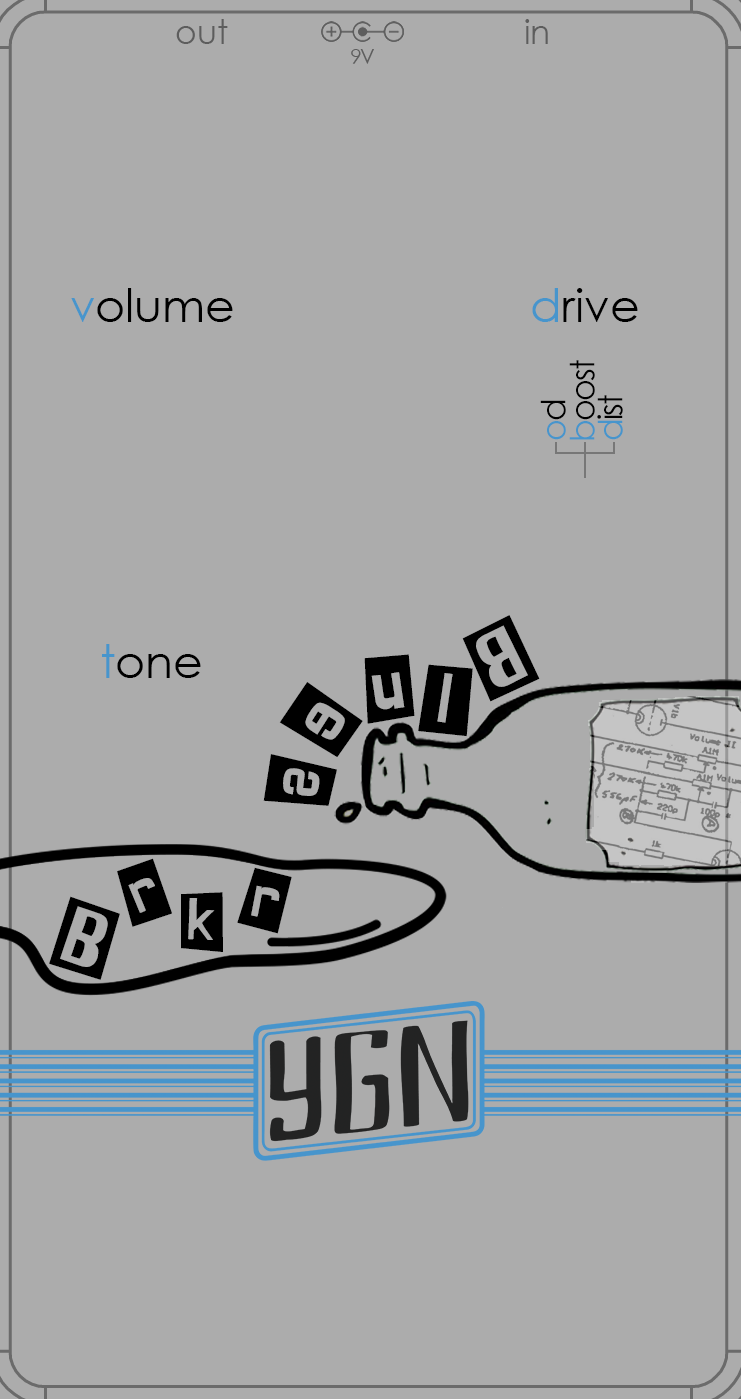
<style>
.page{position:relative;width:741px;height:1399px;background:#acacac}
.page>*{position:absolute;margin:0}
.t1{font:33.3px "CenturyGothic";color:#5d5d5d}
.t2{font:21.5px "CenturyGothic";letter-spacing:-0.1em;color:#5d5d5d}
.t3{font:21.5px "CenturyGothic";color:#5d5d5d}
.t4{font:45.8px "CenturyGothic";color:#000000}
.t5{font:45.8px "CenturyGothic";color:#4795cc}
.t6{font:33.3px "CenturyGothic";letter-spacing:-0.06em;color:#000000}
.t7{font:33.3px "CenturyGothic";letter-spacing:-0.06em;color:#4795cc}
.t8{font:82.7px "SHINJI-BLUES";color:#000000}
.t9{font:70.9px "SHINJI-BLUES";color:#000000}
</style>
<div class="page">
<p class="t1" style="left:176px;top:19px;width:372px;height:25px">out                                in</p>
<p class="t2" style="left:351px;top:49px;width:23px;height:15px">9<span class="t3">V</span></p>
<p class="t4" style="left:71px;top:288px;width:162px;height:34px"><span class="t5">v</span>olume</p>
<p class="t4" style="left:532px;top:288px;width:106px;height:34px"><span class="t5">d</span>rive</p>
<p class="t6" style="left:569px;top:360px;width:26px;height:80px;rotate:-90deg"><span class="t7">b</span>oost</p>
<p class="t7" style="left:540px;top:400px;width:26px;height:40px;rotate:-90deg">o<span class="t6">d</span></p>
<p class="t6" style="left:597px;top:395px;width:26px;height:45px;rotate:-90deg"><span class="t7">d</span>ist</p>
<p class="t8" style="left:462px;top:615px;width:78px;height:87px;rotate:154deg">B</p>
<p class="t4" style="left:102px;top:644px;width:99px;height:34px"><span class="t5">t</span>one</p>
<p class="t8" style="left:364px;top:654px;width:51px;height:70px;rotate:-9deg">u</p>
<p class="t8" style="left:418px;top:664px;width:55px;height:73px;rotate:8deg">l</p>
<p class="t8" style="left:279px;top:682px;width:84px;height:75px;rotate:123deg">e</p>
<p class="t8" style="left:263px;top:754px;width:74px;height:52px;rotate:96deg">s</p>
<p class="t9" style="left:117px;top:858px;width:55px;height:69px;rotate:-22deg">r</p>
<p class="t9" style="left:237px;top:867px;width:55px;height:67px;rotate:11deg">r</p>
<p class="t9" style="left:181px;top:892px;width:42px;height:60px;rotate:2deg">k</p>
<p class="t8" style="left:49px;top:896px;width:71px;height:84px;rotate:19deg">B</p>
</div>
